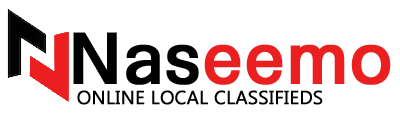
<style>
.page{position:relative;width:400px;height:120px;background:#ffffff}
.page>*{position:absolute;margin:0}
.t1{font:73.3px "Okomito-Medium";color:#eb1f1f;font-weight:bold}
.t2{font:73.3px "Okomito-Medium";color:#000000;font-weight:bold}
.t3{font:18.7px "LaoUI";color:#000000;font-weight:bold}
</style>
<div class="page">
<p class="t1" style="left:73px;top:32px;width:318px;height:53px"><span class="t2">Nas</span>eemo</p>
<p class="t3" style="left:77px;top:90px;width:246px;height:15px">ONLINE LOCAL CLASSIFIEDS</p>
</div>
